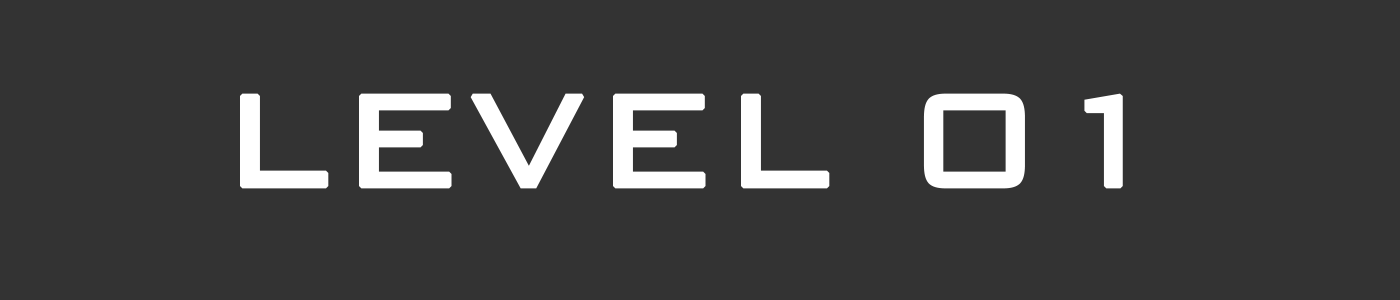
<style>
.page{position:relative;width:1400px;height:300px;background:#333333}
.page>*{position:absolute;margin:0}
.t1{font:175px "BankGothicBT-Light";color:#ffffff;font-weight:bold}
</style>
<div class="page">
<p class="t1" style="left:240px;top:93px;width:883px;height:96px">LEVEL 01</p>
</div>
